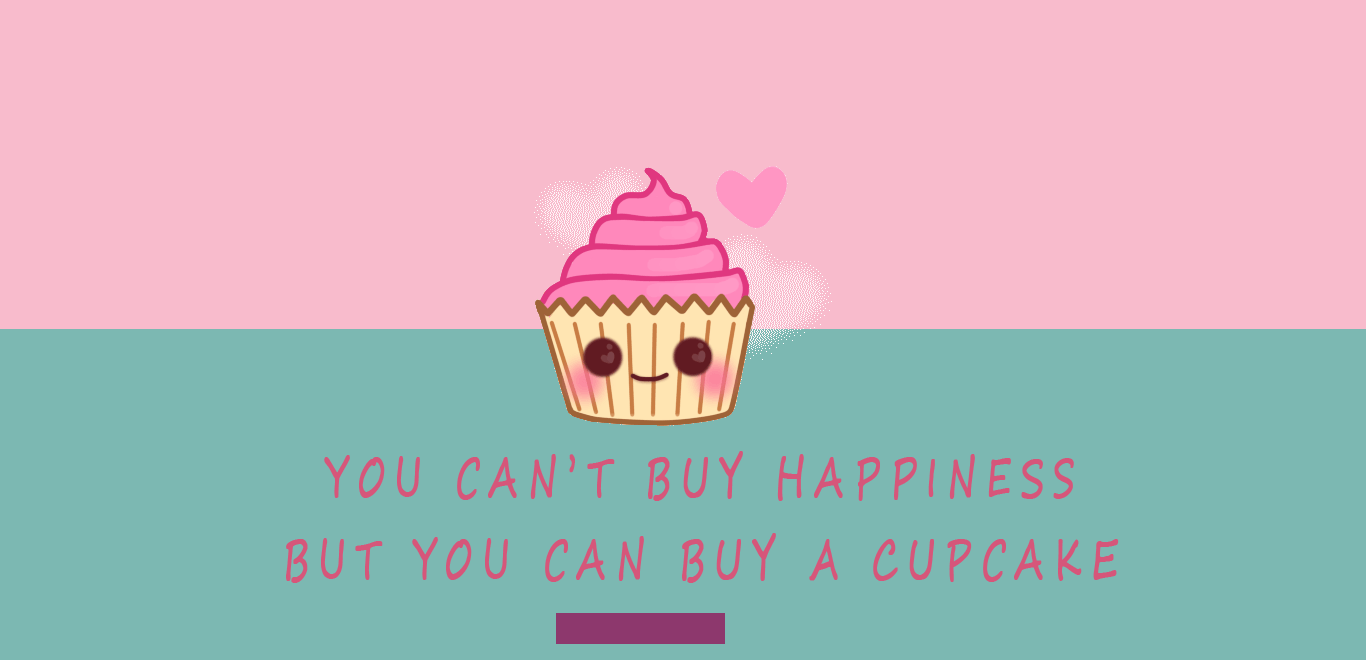
<style>
.page{position:relative;width:1366px;height:660px;background:#f8bbcc}
.page>*{position:absolute;margin:0}
.t1{font:90.3px/82px "SegoeScript";letter-spacing:0.27em;color:#d6567a;text-transform:uppercase;font-weight:bold;scale:0.65 1}
</style>
<div class="page">
<p class="t1" style="left:286px;top:451px;width:833px;height:132px;text-align:center">you can’t buy happiness<br>but you can buy a CUPCAKE</p>
</div>
